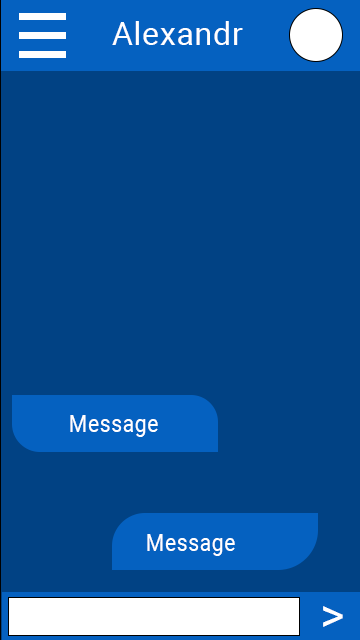
<style>
.page{position:relative;width:360px;height:640px;background:#014284}
.page>*{position:absolute;margin:0}
.t1{font:31.9px "Roboto-Regular";letter-spacing:0.025em;color:#ffffff}
.t2{font:24.1px "Roboto-Regular";letter-spacing:0.025em;color:#ffffff;scale:0.88 1}
.t3{font:47.4px "Roboto-Regular";letter-spacing:0.025em;color:#ffffff}
</style>
<div class="page">
<p class="t1" style="left:112px;top:21px;width:131px;height:24px">Alexandr</p>
<p class="t2" style="left:70px;top:415px;width:88px;height:22px">Message</p>
<p class="t2" style="left:147px;top:534px;width:88px;height:22px">Message</p>
<p class="t3" style="left:323px;top:606px;width:20px;height:21px">&gt;</p>
</div>
